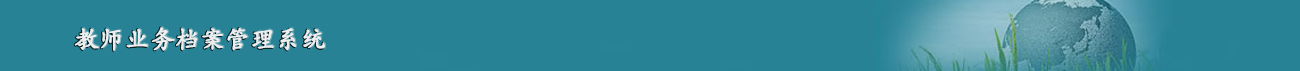
<style>
.page{position:relative;width:1300px;height:71px;background:#278295}
.page>*{position:absolute;margin:0}
.t1{font:24.7px "STKaiti";letter-spacing:0.02em;color:#eeeeee;font-weight:bold}
</style>
<div class="page">
<p class="t1" style="left:74px;top:27px;width:251px;height:25px">教师业务档案管理系统</p>
</div>
